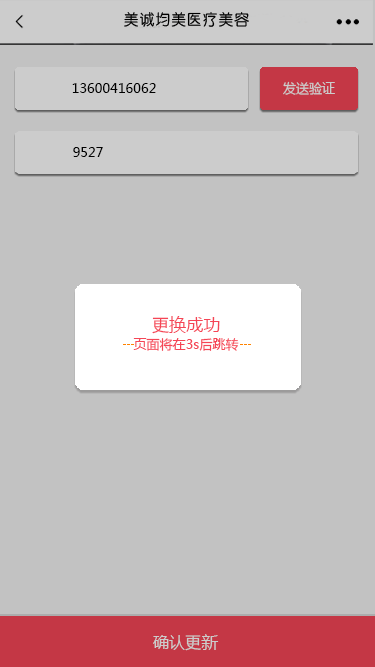
<style>
.page{position:relative;width:375px;height:667px;background:#c2c2c2}
.page>*{position:absolute;margin:0}
.t1{font:13px "MicrosoftYaHei";letter-spacing:0.005em;color:#000000}
.t2{font:13px "MicrosoftYaHei";letter-spacing:0.005em;color:#cccccc}
.t3{font:17.1px "MicrosoftYaHei";letter-spacing:0.005em;color:#f54556}
.t4{font:13px "MicrosoftYaHei";letter-spacing:0.005em;color:#f54556}
.t5{font:16px "MicrosoftYaHei";letter-spacing:0.005em;color:#cccccc}
.t6{font:16.7px "MicrosoftYaHei";letter-spacing:0.005em;color:#cccccc}
</style>
<div class="page">
<p class="t1" style="left:72px;top:83px;width:84px;height:10px">13600416062</p>
<p class="t2" style="left:283px;top:81px;width:52px;height:14px">发送验证</p>
<p class="t1" style="left:73px;top:147px;width:30px;height:10px">9527</p>
<p class="t3" style="left:152px;top:316px;width:68px;height:18px">更换成功</p>
<p class="t4" style="left:133px;top:338px;width:106px;height:13px">页面将在3s后跳转</p>
<p class="t5" style="left:153px;top:635px;width:48px;height:16px">确认更</p>
<p class="t6" style="left:201px;top:634px;width:18px;height:16px">新</p>
</div>
